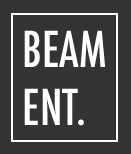
<style>
.page{position:relative;width:131px;height:154px;background:#333333}
.page>*{position:absolute;margin:0}
.t1{font:48px "Futura-CondensedMedium";color:#ffffff}
</style>
<div class="page">
<p class="t1" style="left:24px;top:30px;width:81px;height:96px">BEAM<br>ENT.</p>
</div>
